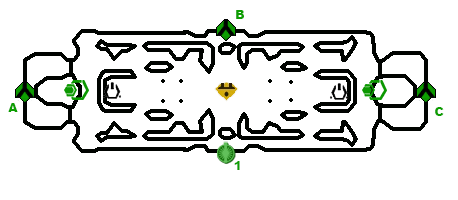
<style>
.page{position:relative;width:458px;height:200px;background:#ffffff}
.page>*{position:absolute;margin:0}
.t1{font:12px "Arial-Black";color:#0d9e01}
</style>
<div class="page">
<p class="t1" style="left:236px;top:10px;width:8px;height:9px">B</p>
<p class="t1" style="left:8px;top:103px;width:10px;height:9px">A</p>
<p class="t1" style="left:435px;top:107px;width:9px;height:9px">C</p>
<p class="t1" style="left:234px;top:161px;width:6px;height:9px">1</p>
</div>
